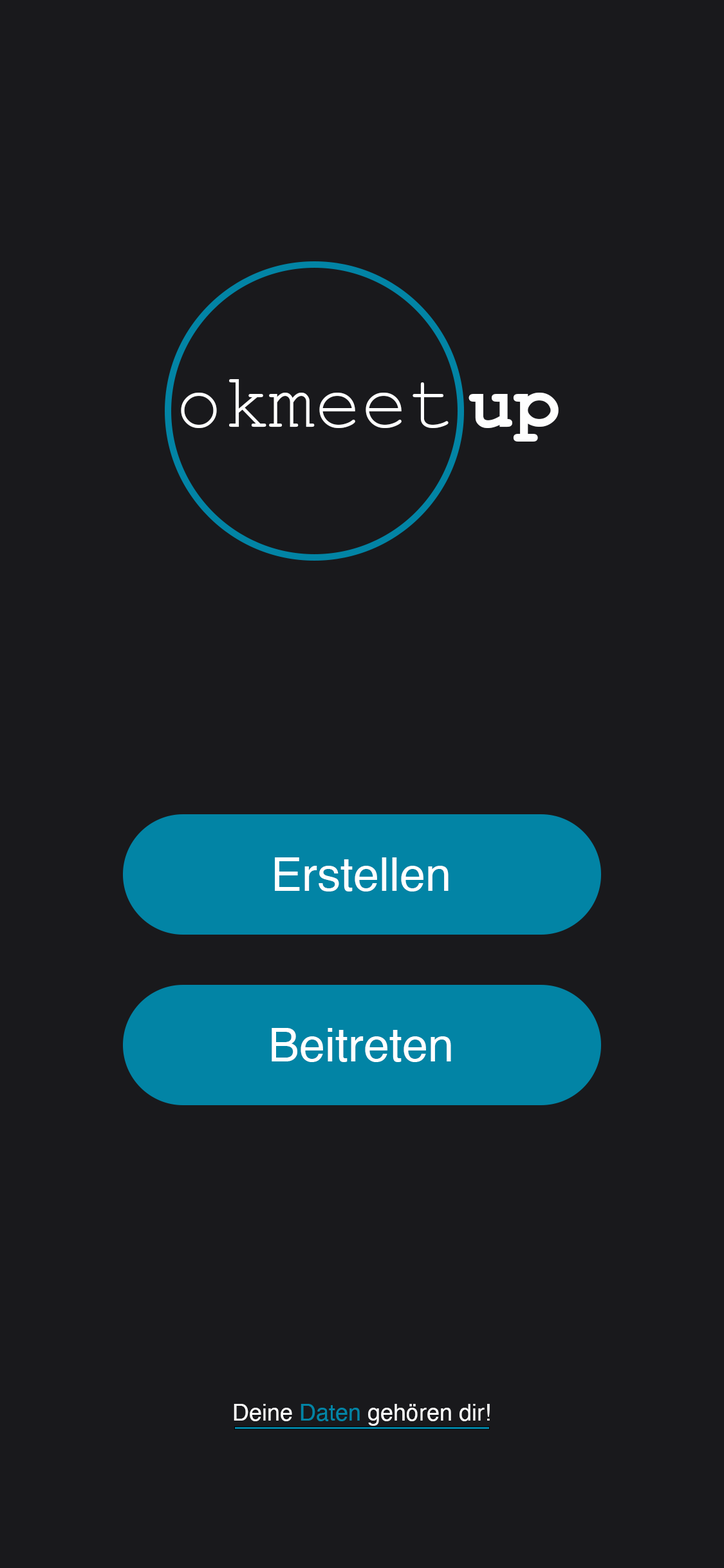
<style>
.page{position:relative;width:724px;height:1568px;background:#19191c}
.page>*{position:absolute;margin:0}
.t1{font:77.2px "CourierNewPSMT";color:#fefefe}
.t2{font:77.2px "CourierNewPS-BoldMT";color:#fefefe}
.t3{font:46.3px "Helvetica";color:#ffffff}
.t4{font:23.2px "Helvetica";color:#ffffff}
.t5{font:23.2px "Helvetica";color:#0284a5}
</style>
<div class="page">
<p class="t1" style="left:181px;top:379px;width:268px;height:49px">okmeet</p>
<p class="t2" style="left:469px;top:393px;width:90px;height:49px">up</p>
<p class="t3" style="left:275px;top:857px;width:174px;height:34px">Erstellen</p>
<p class="t3" style="left:272px;top:1028px;width:179px;height:34px">Beitreten</p>
<p class="t4" style="left:234px;top:1404px;width:256px;height:22px">Deine <span class="t5">Daten </span>gehören dir!</p>
</div>
